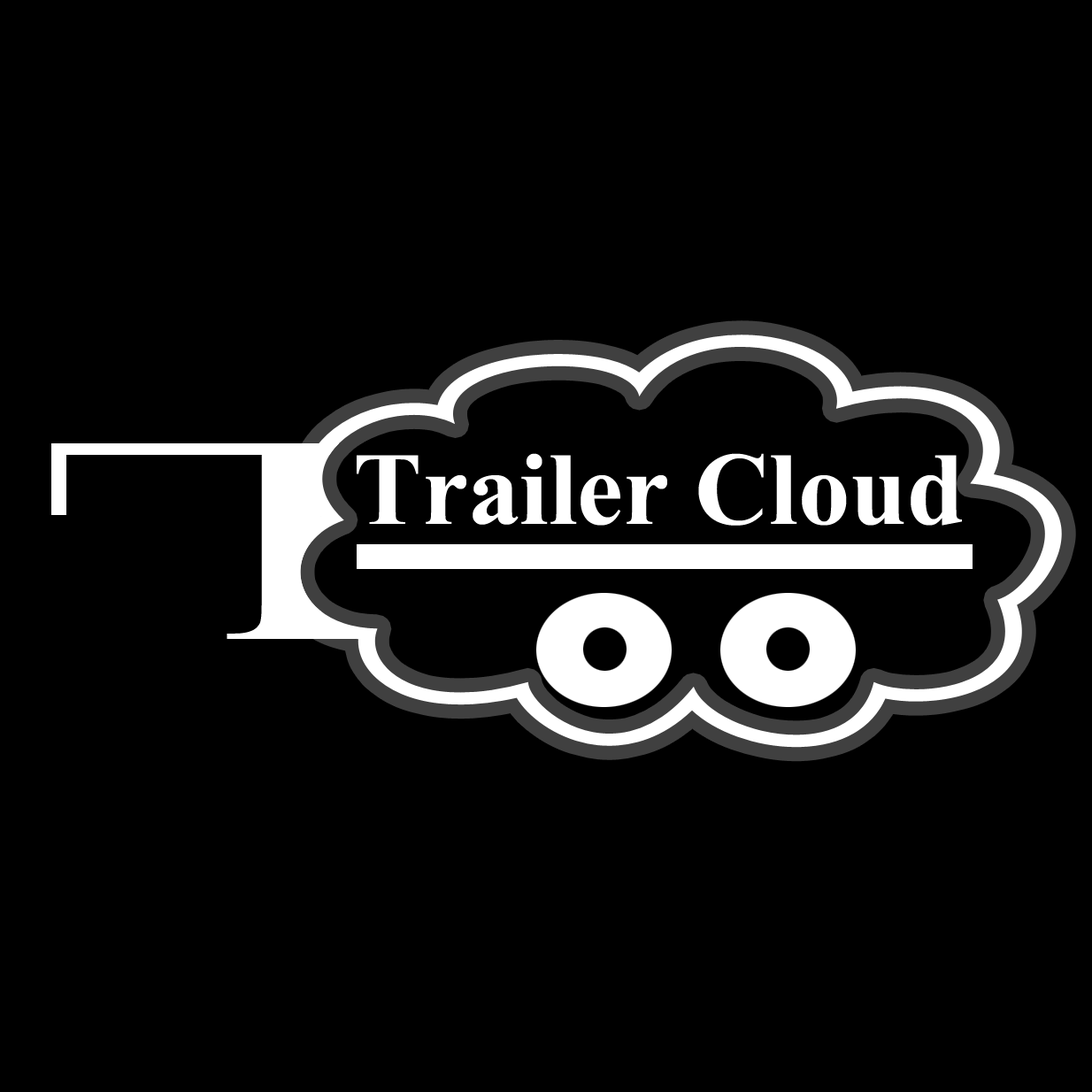
<style>
.page{position:relative;width:1092px;height:1092px;background:#000000}
.page>*{position:absolute;margin:0}
.t1{font:103.2px "TimesNewRomanPS-BoldMT";color:#ffffff}
</style>
<div class="page">
<p class="t1" style="left:357px;top:453px;width:605px;height:73px">Trailer Cloud</p>
</div>
